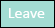
<style>
.page{position:relative;width:55px;height:28px;background:#a3dcd3}
.page>*{position:absolute;margin:0}
.t1{font:16px "Calibri";color:#ffffff}
</style>
<div class="page">
<p class="t1" style="left:9px;top:8px;width:36px;height:10px">Leave</p>
</div>
